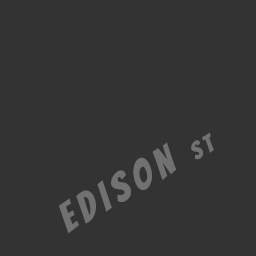
<style>
.page{position:relative;width:256px;height:256px;background:#333333}
.page>*{position:absolute;margin:0}
.t1{font:40px "Bangers-Regular";letter-spacing:0.16em;color:#717171}
.t2{font:24px "Bangers-Regular";letter-spacing:0.16em;color:#717171}
</style>
<div class="page">
<p class="t1" style="left:59px;top:132px;width:155px;height:102px;rotate:-30deg">EDISON <span class="t2">ST</span></p>
</div>
